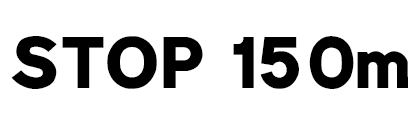
<style>
.page{position:relative;width:420px;height:120px;background:#ffffff}
.page>*{position:absolute;margin:0}
.t1{font:72px "Ccrige-Regular";color:#000000}
</style>
<div class="page">
<p class="t1" style="left:11px;top:36px;width:397px;height:53px">STOP 150m</p>
</div>
